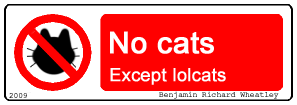
<style>
.page{position:relative;width:297px;height:105px;background:#ff0000}
.page>*{position:absolute;margin:0}
.t1{font:29.9px "ArialMT";color:#ffffff;font-weight:bold}
.t2{font:17.9px "ArialMT";color:#ffffff;font-weight:bold}
.t3{font:8px "Courier"}
</style>
<div class="page">
<p class="t1" style="left:110px;top:31px;width:104px;height:23px">No cats</p>
<p class="t2" style="left:110px;top:68px;width:116px;height:17px">Except lolcats</p>
<p class="t3" style="left:9px;top:93px;width:18px;height:5px">2009</p>
<p class="t3" style="left:159px;top:91px;width:120px;height:8px">Benjamin Richard Wheatley</p>
</div>
